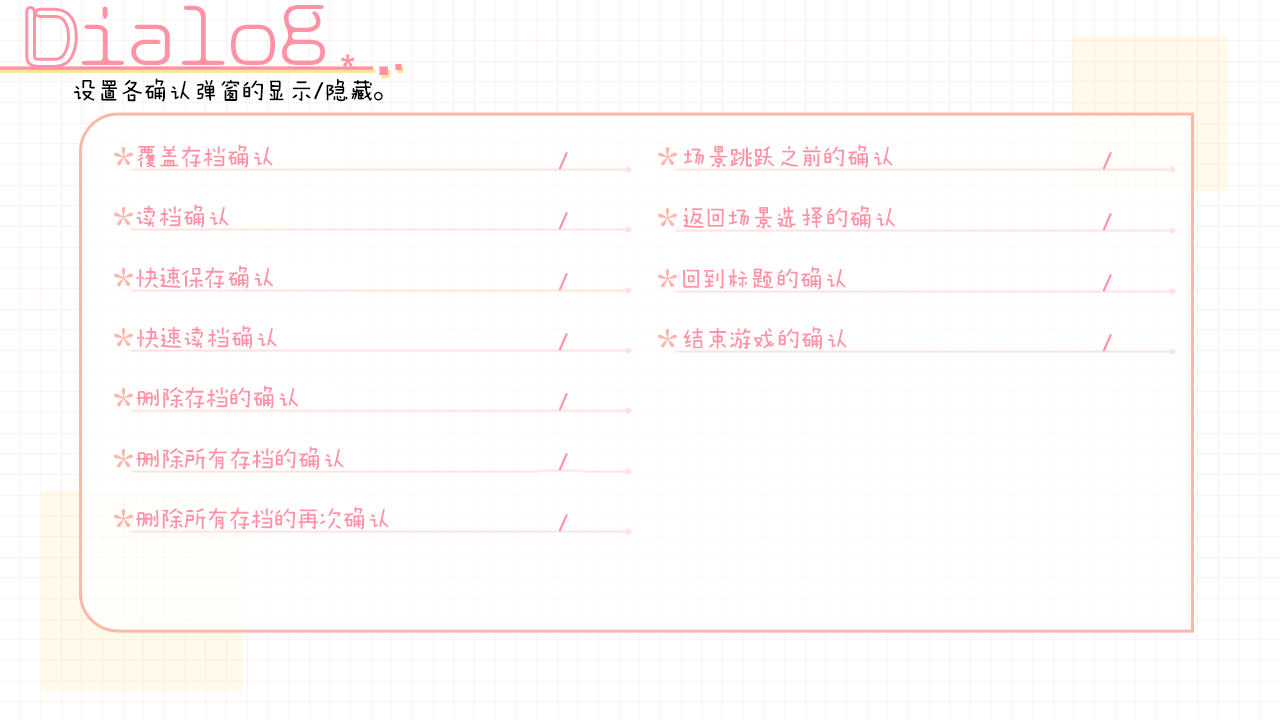
<style>
.page{position:relative;width:1280px;height:720px;background:#ffffff}
.page>*{position:absolute;margin:0}
.t1{font:26px "¢è?";color:#000000}
.t2{font:26px "¢è?";color:#ff93a5}
</style>
<div class="page">
<p class="t1" style="left:74px;top:78px;width:309px;height:24px">设置各确认弹窗的显示/隐藏。</p>
<p class="t2" style="left:137px;top:144px;width:136px;height:24px">覆盖存档确认</p>
<p class="t2" style="left:683px;top:144px;width:210px;height:24px">场景跳跃之前的确认</p>
<p class="t2" style="left:136px;top:204px;width:93px;height:24px">读档确认</p>
<p class="t2" style="left:683px;top:205px;width:212px;height:24px">返回场景选择的确认</p>
<p class="t2" style="left:136px;top:265px;width:137px;height:24px">快速保存确认</p>
<p class="t2" style="left:683px;top:266px;width:163px;height:24px">回到标题的确认</p>
<p class="t2" style="left:136px;top:325px;width:141px;height:24px">快速读档确认</p>
<p class="t2" style="left:683px;top:326px;width:164px;height:24px">结束游戏的确认</p>
<p class="t2" style="left:136px;top:385px;width:162px;height:24px">删除存档的确认</p>
<p class="t2" style="left:136px;top:446px;width:208px;height:24px">删除所有存档的确认</p>
<p class="t2" style="left:136px;top:506px;width:253px;height:24px">删除所有存档的再次确认</p>
</div>
